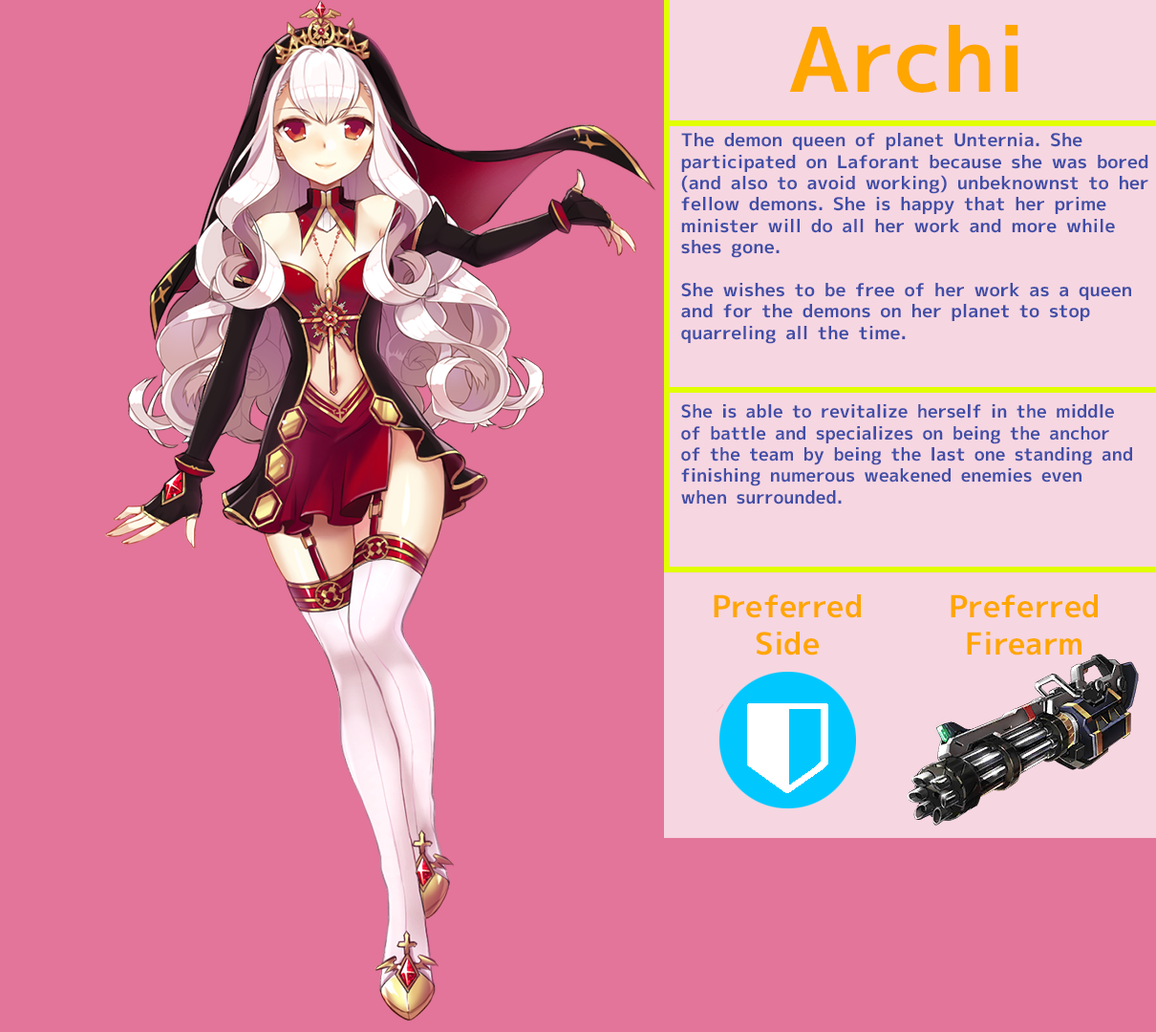
<style>
.page{position:relative;width:1156px;height:1032px;background:#e27599}
.page>*{position:absolute;margin:0}
.t1{font:89.2px "MigMix-2P-Bold";color:#ffa600}
.t2{font:17.8px "MigMix-2P-Bold";color:#404ea7;scale:1.03 1}
.t3{font:17.8px "MigMix-2P-Bold";color:#404ea7}
.t4{font:30.6px "MigMix-2P-Bold";color:#ffa600}
</style>
<div class="page">
<p class="t1" style="left:789px;top:25px;width:229px;height:68px">Archi</p>
<p class="t2" style="left:681px;top:133px;width:467px;height:211px">The demon queen of planet Unternia. She participated on Laforant because she was bored (and also to avoid working) unbeknownst to her fellow demons. She is happy that her prime minister will do all her work and more while shes gone.<br><br>She wishes to be free of her work as a queen and for the demons on her planet to stop quarreling all the time.</p>
<p class="t3" style="left:681px;top:404px;width:451px;height:100px">She is able to revitalize herself in the middle of battle and specializes on being the anchor of the team by being the last one standing and finishing numerous weakened enemies even when surrounded.</p>
<p class="t4" style="left:714px;top:594px;width:147px;height:61px;text-align:center">Preferred<br>Side</p>
<p class="t4" style="left:950px;top:594px;width:148px;height:61px;text-align:center">Preferred<br>Firearm</p>
</div>
